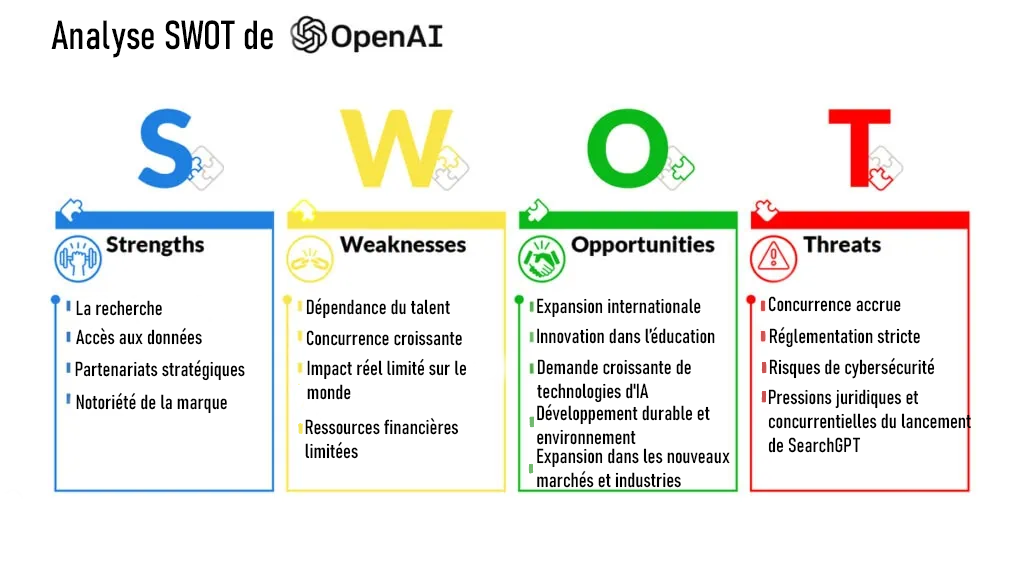
<style>
.page{position:relative;width:1024px;height:576px;background:#ffffff}
.page>*{position:absolute;margin:0}
.t1{font:40px "Bahnschrift-Condensed";color:#000000}
.t2{font:20px "Bahnschrift-Condensed";color:#000000}
</style>
<div class="page">
<p class="t1" style="left:51px;top:20px;width:222px;height:38px">Analyse SWOT de</p>
<p class="t2" style="left:76px;top:300px;width:86px;height:16px">La recherche</p>
<p class="t2" style="left:306px;top:297px;width:144px;height:22px">Dépendance du talent</p>
<p class="t2" style="left:537px;top:298px;width:164px;height:20px">Expansion internationale</p>
<p class="t2" style="left:768px;top:296px;width:133px;height:16px">Concurrence accrue</p>
<p class="t2" style="left:76px;top:327px;width:126px;height:18px">Accès aux données</p>
<p class="t2" style="left:537px;top:326px;width:178px;height:18px">Innovation dans l’éducation</p>
<p class="t2" style="left:769px;top:326px;width:151px;height:22px">Réglementation stricte</p>
<p class="t2" style="left:306px;top:330px;width:156px;height:16px">Concurrence croissante</p>
<p class="t2" style="left:75px;top:359px;width:170px;height:22px">Partenariats stratégiques</p>
<p class="t2" style="left:307px;top:358px;width:160px;height:42px">Impact réel limité sur le<br>monde</p>
<p class="t2" style="left:537px;top:359px;width:154px;height:44px">Demande croissante de <br>technologies d'IA</p>
<p class="t2" style="left:769px;top:357px;width:166px;height:22px">Risques de cybersécurité</p>
<p class="t2" style="left:768px;top:389px;width:203px;height:64px">Pressions juridiques et <br>concurrentielles du lancement<br>de SearchGPT</p>
<p class="t2" style="left:76px;top:392px;width:151px;height:22px">Notoriété de la marque</p>
<p class="t2" style="left:537px;top:403px;width:173px;height:42px">Développement durable et <br>environnement</p>
<p class="t2" style="left:305px;top:417px;width:154px;height:42px">Ressources financières<br>limitées</p>
<p class="t2" style="left:537px;top:448px;width:193px;height:40px">Expansion dans les nouveaux<br>marchés et industries</p>
</div>
